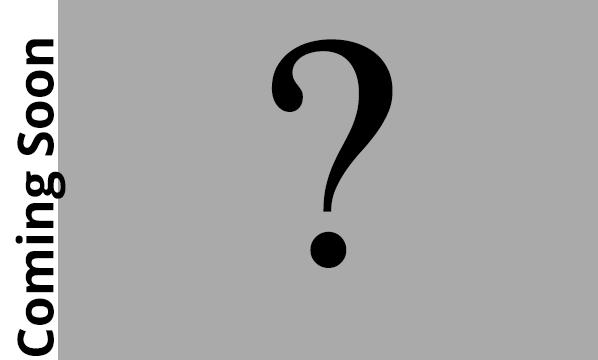
<style>
.page{position:relative;width:598px;height:360px;background:#aaaaaa}
.page>*{position:absolute;margin:0}
.t1{font:50px "OpenSans-Bold";color:#000000}
.t2{font:458.8px "SinhalaMN";color:#000000}
</style>
<div class="page">
<p class="t1" style="left:15px;top:39px;width:51px;height:317px;rotate:-90deg">Coming Soon</p>
<p class="t2" style="left:271px;top:39px;width:122px;height:229px">?</p>
</div>
